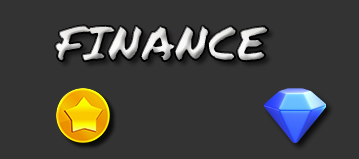
<style>
.page{position:relative;width:359px;height:159px;background:#333333}
.page>*{position:absolute;margin:0}
.t1{font:48px "PermanentMarker"}
</style>
<div class="page">
<p class="t1" style="left:55px;top:25px;width:213px;height:37px">FINANCE</p>
</div>
